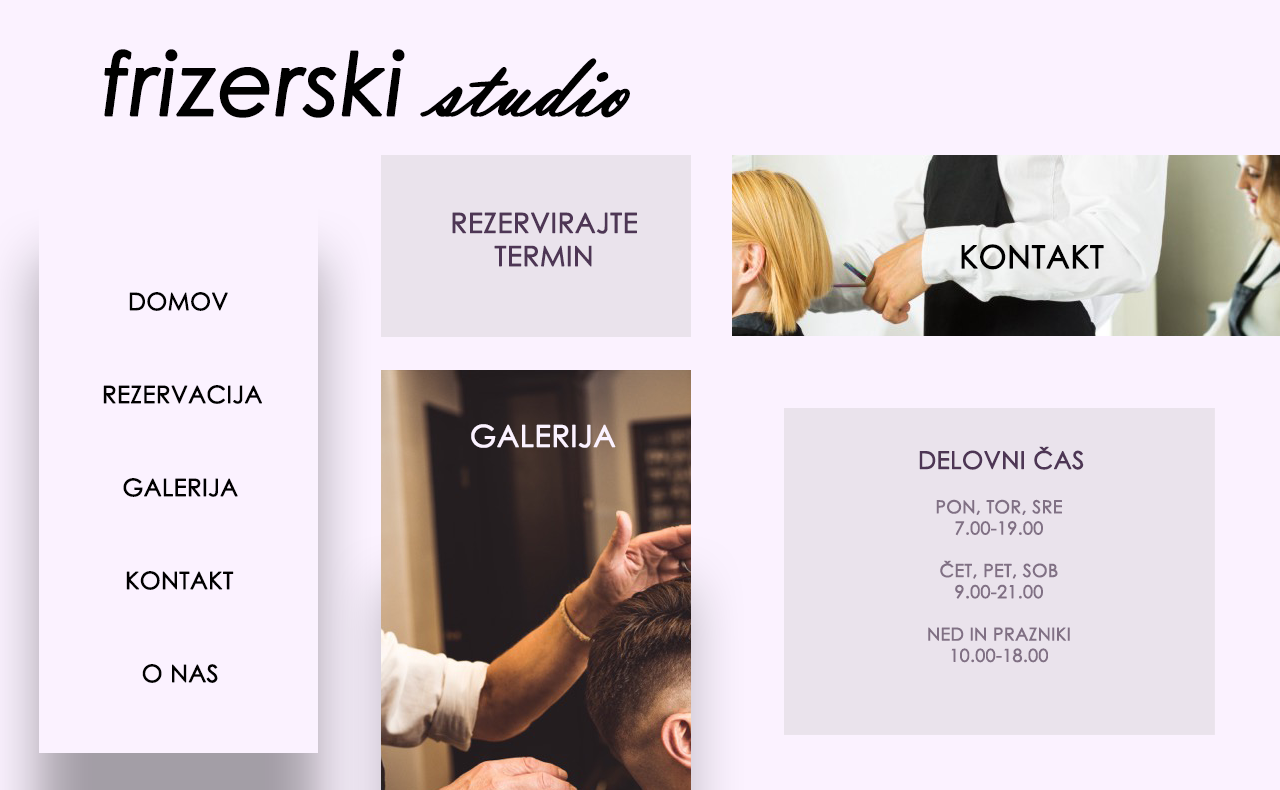
<style>
.page{position:relative;width:1280px;height:790px;background:#fbf2ff}
.page>*{position:absolute;margin:0}
.t1{font:86.4px "CenturyGothic-Italic";color:#000000;font-weight:bold}
.t2{font:94.7px "VladimirScript";color:#000000;font-weight:bold}
.t3{font:27.6px "CenturyGothic";color:#4e3655;font-weight:bold}
.t4{font:31.8px "CenturyGothic";color:#000000;font-weight:bold}
.t5{font:23.8px "CenturyGothic";color:#000000;font-weight:bold}
.t6{font:30px "CenturyGothic";color:#fbf2ff;font-weight:bold}
.t7{font:24.2px "CenturyGothic";color:#4e3655;font-weight:bold}
.t8{font:17.7px "CenturyGothic";color:#807084;font-weight:bold}
</style>
<div class="page">
<p class="t1" style="left:104px;top:49px;width:526px;height:69px">frizerski <span class="t2">studio</span></p>
<p class="t3" style="left:452px;top:212px;width:185px;height:55px;text-align:center">REZERVIRAJTE<br>TERMIN</p>
<p class="t4" style="left:961px;top:244px;width:143px;height:26px">KONTAKT</p>
<p class="t5" style="left:129px;top:292px;width:99px;height:19px">DOMOV</p>
<p class="t5" style="left:103px;top:385px;width:159px;height:19px">REZERVACIJA</p>
<p class="t6" style="left:471px;top:424px;width:145px;height:24px">GALERIJA</p>
<p class="t7" style="left:919px;top:446px;width:165px;height:24px">DELOVNI ČAS</p>
<p class="t5" style="left:123px;top:478px;width:115px;height:19px">GALERIJA</p>
<p class="t8" style="left:928px;top:499px;width:142px;height:164px;text-align:center">PON, TOR, SRE<br>7.00-19.00<br><br>ČET, PET, SOB<br>9.00-21.00<br><br>NED IN PRAZNIKI<br>10.00-18.00</p>
<p class="t5" style="left:126px;top:571px;width:108px;height:19px">KONTAKT</p>
<p class="t5" style="left:142px;top:664px;width:76px;height:19px">O NAS</p>
</div>
